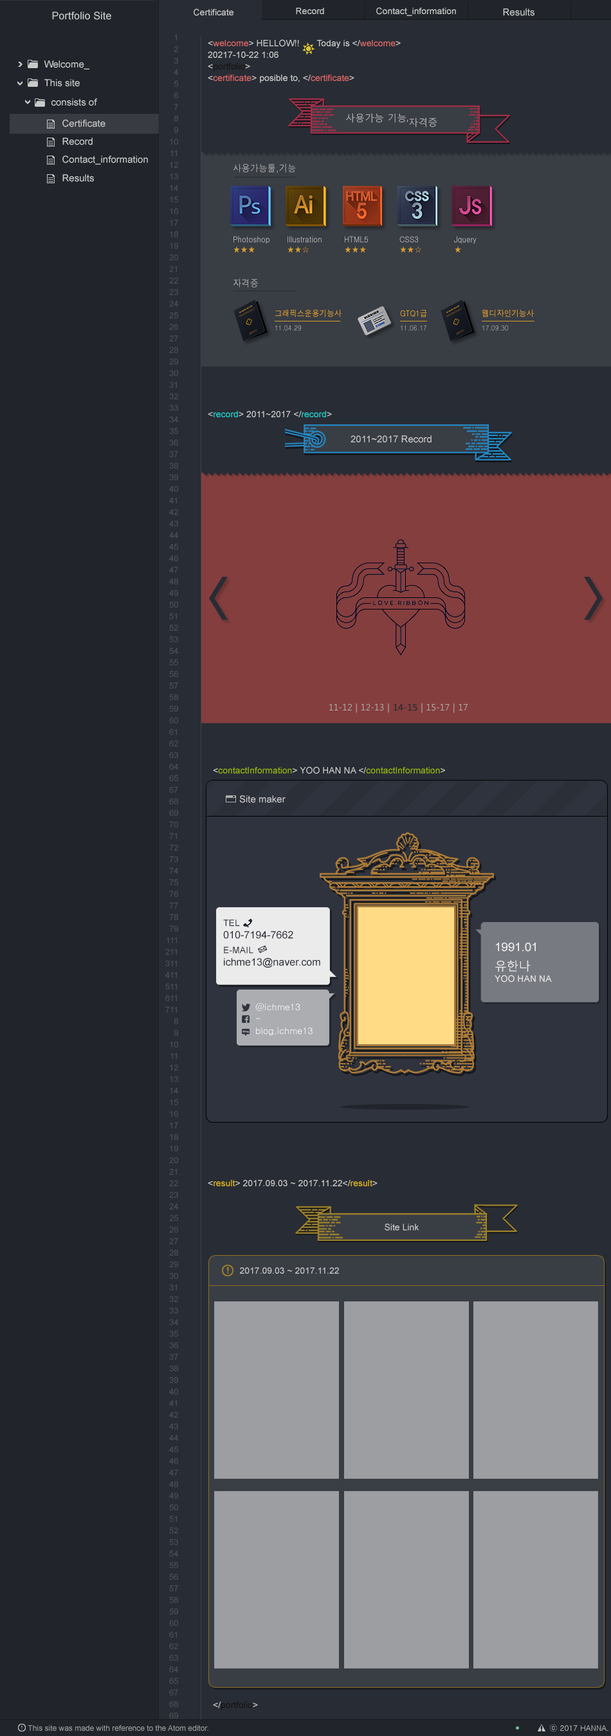
<style>
.page{position:relative;width:611px;height:1736px;background:#21252b}
.page>*{position:absolute;margin:0}
.t1{font:10.3px "ArialMT";letter-spacing:0.01em;color:#cacaca}
.t2{font:9px "ArialMT";color:#cacaca}
.t3{font:9.6px "ArialMT";color:#cacaca}
.t4{font:9px/11.6px "ArialMT";color:#cacaca}
.t5{font:9px/11.6px "ArialMT";color:#dc6868}
.t6{font:9px/11.6px "ArialMT";color:#db6868}
.t7{font:9px/11.6px "ArialMT";color:#151111}
.t8{font:9px "ArialMT";color:#dc6868}
.t9{font:9.6px/4.5px "MalgunGothicRegular";color:#adadad}
.t10{font:9.6px "Dotum";color:#bababa;scale:0.89 1}
.t11{font:8.4px "Dotum";color:#bababa;scale:0.89 1}
.t12{font:8.4px "Dotum";color:#d39f2f;scale:0.89 1}
.t13{font:8.4px/14.1px "Dotum";color:#eca929;scale:0.89 1}
.t14{font:7.1px/14.1px "Dotum";color:#bababa;scale:0.89 1}
.t15{font:9px "ArialMT";color:#1ed1cf}
.t16{font:9px "MalgunGothicRegular";color:#adadad}
.t17{font:9px "MalgunGothicRegular";color:#282c34;font-weight:bold}
.t18{font:9px "ArialMT";color:#93b50a}
.t19{font:10.3px "ArialMT";color:#282c34}
.t20{font:9px "ArialMT";color:#282c34}
.t21{font:9px/14.8px "ArialMT";color:#282c34}
.t22{font:9px/12.2px "ArialMT";color:#ececec}
.t23{font:11.9px/19.8px "ArialMT";color:#ececec}
.t24{font:11.9px/18.5px "MalgunGothicRegular";color:#ececec}
.t25{font:9px "Gulim";color:#ffffff}
.t26{font:9px "Gulim"}
.t27{font:9px "ArialMT";color:#e2ba1b}
.t28{font:7.7px "ArialMT";color:#9c9c9c}
.t29{font:7.7px "Gulim";color:#cacaca}
</style>
<div class="page">
<p class="t1" style="left:52px;top:12px;width:59px;height:8px">Portfolio Site</p>
<p class="t2" style="left:194px;top:8px;width:39px;height:8px">Certificate</p>
<p class="t2" style="left:296px;top:8px;width:28px;height:6px">Record</p>
<p class="t2" style="left:376px;top:7px;width:80px;height:9px">Contact_information</p>
<p class="t3" style="left:503px;top:8px;width:31px;height:8px">Results</p>
<p class="t4" style="left:208px;top:39px;width:193px;height:32px">&lt;<span class="t5">welcome</span>&gt; HELLOW!!       Today is &lt;/<span class="t6">welcome</span>&gt;<br>20217-10-22 1:06<br>&lt;<span class="t7">portfolio</span>&gt;</p>
<p class="t3" style="left:44px;top:60px;width:45px;height:9px">Welcome_</p>
<p class="t2" style="left:208px;top:75px;width:146px;height:8px">&lt;<span class="t8">certificate</span>&gt; posible to, &lt;/<span class="t8">certificate</span>&gt;</p>
<p class="t3" style="left:44px;top:79px;width:36px;height:8px">This site</p>
<p class="t3" style="left:51px;top:98px;width:46px;height:8px">consists of</p>
<p class="t9" style="left:346px;top:113px;width:91px;height:14px">사용가능 기능, <br>       자격증</p>
<p class="t3" style="left:62px;top:120px;width:43px;height:7px">Certificate</p>
<p class="t3" style="left:62px;top:138px;width:31px;height:7px">Record</p>
<p class="t3" style="left:62px;top:156px;width:86px;height:9px">Contact_information</p>
<p class="t10" style="left:233px;top:163px;width:63px;height:10px">사용가능툴,기능</p>
<p class="t3" style="left:62px;top:174px;width:32px;height:8px">Results</p>
<p class="t11" style="left:233px;top:236px;width:36px;height:17px">Photoshop<br><span class="t12">★★★</span></p>
<p class="t11" style="left:287px;top:236px;width:34px;height:17px">Illustration<br><span class="t12">★★☆</span></p>
<p class="t11" style="left:345px;top:236px;width:23px;height:17px">HTML5<br><span class="t12">★★★</span></p>
<p class="t11" style="left:399px;top:236px;width:22px;height:17px">CSS3<br><span class="t12">★★☆</span></p>
<p class="t11" style="left:454px;top:236px;width:22px;height:17px">Jquery<br><span class="t12">★</span></p>
<p class="t10" style="left:233px;top:278px;width:25px;height:9px">자격증</p>
<p class="t13" style="left:274px;top:309px;width:67px;height:21px">그래픽스운용기능사<br><span class="t14">11.04.29</span></p>
<p class="t14" style="left:400px;top:310px;width:27px;height:20px"><span class="t13">GTQ1급<br></span>11.06.17</p>
<p class="t14" style="left:482px;top:309px;width:52px;height:21px"><span class="t13">웹디자인기능사<br></span>17.09.30</p>
<p class="t2" style="left:208px;top:411px;width:124px;height:6px">&lt;<span class="t15">record</span>&gt; 2011~2017 &lt;/<span class="t15">record</span>&gt;</p>
<p class="t3" style="left:350px;top:435px;width:81px;height:8px">2011~2017 Record</p>
<p class="t16" style="left:329px;top:703px;width:138px;height:10px">11-12 | 12-13 |<span class="t17"> 14-15</span> | 15-17 | 17</p>
<p class="t18" style="left:213px;top:766px;width:232px;height:8px"><span class="t2">&lt;</span>contactInformation<span class="t2">&gt; YOO HAN NA &lt;/</span>contactInformation<span class="t2">&gt;</span></p>
<p class="t3" style="left:239px;top:795px;width:46px;height:8px">Site maker</p>
<p class="t19" style="left:223px;top:919px;width:97px;height:49px"><span class="t20">TEL<br></span>010-7194-7662<br><span class="t21">E-MAIL<br></span>ichme13@naver.com</p>
<p class="t22" style="left:494px;top:942px;width:58px;height:40px"><span class="t23">1991.01<br></span><span class="t24">유한나<br></span>YOO HAN NA</p>
<p class="t25" style="left:255px;top:1003px;width:45px;height:8px">@ichme13</p>
<p class="t26" style="left:256px;top:1018px;width:4px;height:1px">-</p>
<p class="t25" style="left:256px;top:1027px;width:56px;height:9px">blog.ichme13</p>
<p class="t2" style="left:208px;top:1180px;width:169px;height:6px">&lt;<span class="t27">result</span>&gt; 2017.09.03 ~ 2017.11.22&lt;/<span class="t27">result</span>&gt;</p>
<p class="t2" style="left:240px;top:1267px;width:99px;height:7px">2017.09.03 ~ 2017.11.22</p>
<p class="t28" style="left:28px;top:1725px;width:180px;height:6px">This site was made with reference to the Atom editor.</p>
<p class="t29" style="left:550px;top:1724px;width:58px;height:7px">ⓒ 2017 HANNA.</p>
</div>
